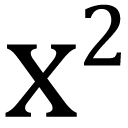
<style>
.page{position:relative;width:128px;height:128px;background:#ffffff}
.page>*{position:absolute;margin:0}
.t1{font:154px "Cambria";color:#000000}
</style>
<div class="page">
<p class="t1" style="left:5px;top:4px;width:116px;height:113px">x2</p>
</div>
